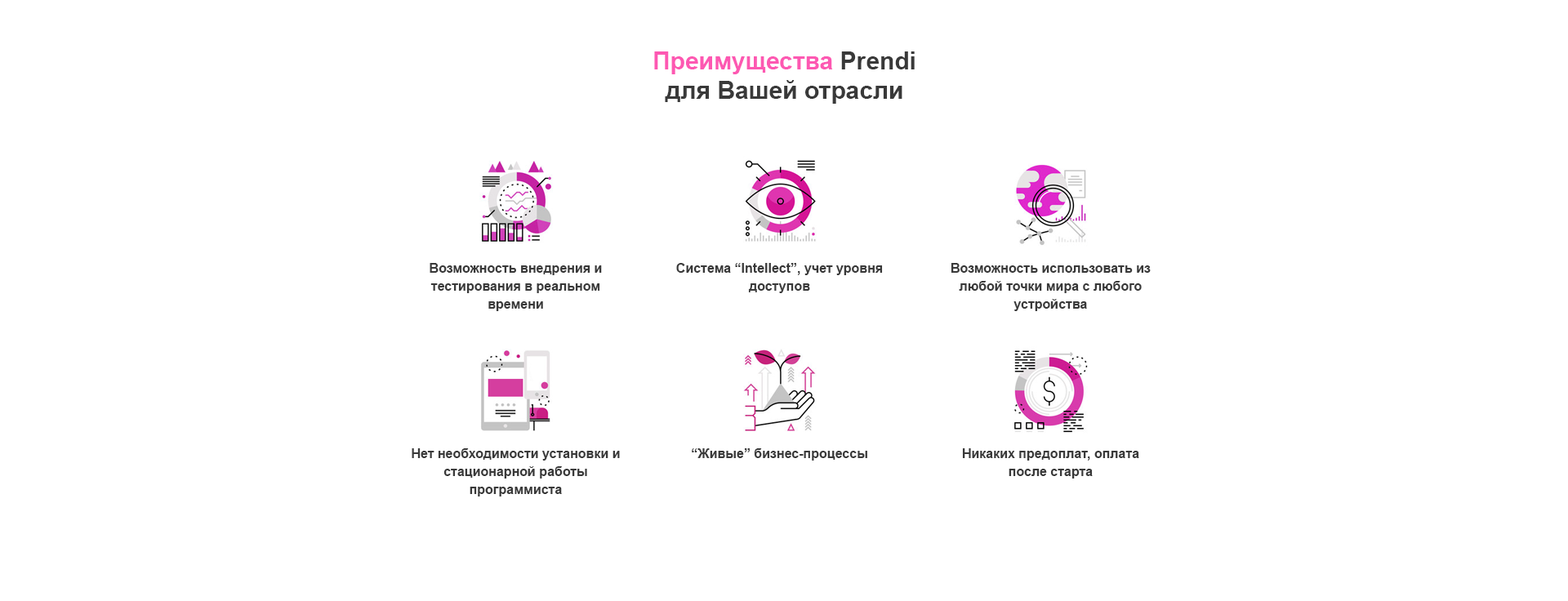
<style>
.page{position:relative;width:1568px;height:601px;background:#ffffff}
.page>*{position:absolute;margin:0}
.t1{font:24.5px/29.4px "Arial-BoldMT";color:#393939}
.t2{font:24.5px/29.4px "Arial-BoldMT";color:#fd58b2}
.t3{font:13.1px/18px "Arial-BoldMT";color:#393939}
.t4{font:13.1px "Arial-BoldMT";color:#393939}
</style>
<div class="page">
<p class="t1" style="left:654px;top:51px;width:261px;height:53px;text-align:center"><span class="t2">Преимущества </span>Prendi <br>для Вашей отрасли</p>
<p class="t3" style="left:430px;top:263px;width:172px;height:48px;text-align:center">Возможность внедрения и тестирования в реальном времени</p>
<p class="t3" style="left:676px;top:263px;width:207px;height:30px;text-align:center">Система “Intellect”, учет уровня доступов</p>
<p class="t3" style="left:951px;top:263px;width:200px;height:48px;text-align:center">Возможность использовать из любой точки мира с любого устройства</p>
<p class="t3" style="left:412px;top:448px;width:208px;height:49px;text-align:center">Нет необходимости установки и стационарной работы программиста</p>
<p class="t4" style="left:692px;top:448px;width:175px;height:13px">“Живые” бизнес-процессы</p>
<p class="t3" style="left:962px;top:448px;width:177px;height:31px;text-align:center">Никаких предоплат, оплата<br>после старта</p>
</div>
